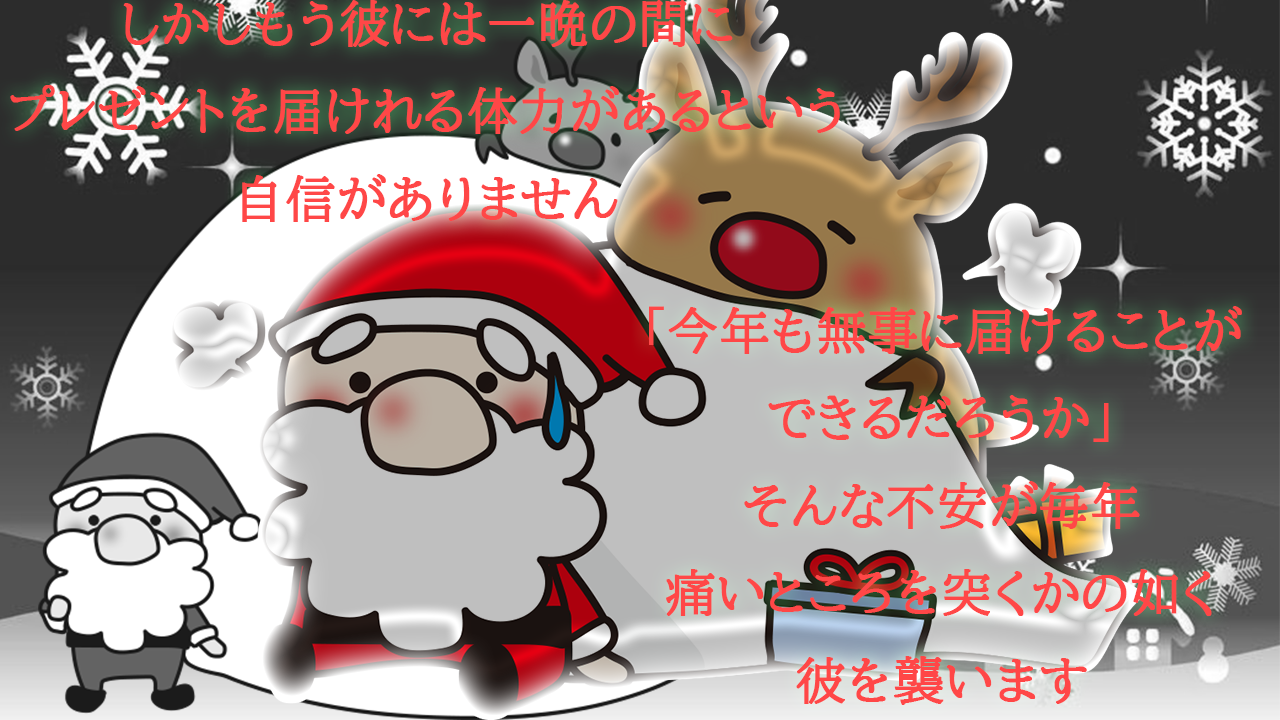
<style>
.page{position:relative;width:1280px;height:720px}
.page>*{position:absolute;margin:0}
.t1{font:12px "BIZ-UDPMincho-Medium";color:#ff4747;font-weight:bold}
</style>
<div class="page">
<p class="t1" style="left:10px;top:0px;width:830px;height:222px;text-align:center">しかしもう彼には一晩の間に<br>プレゼントを届けれる体力があるという<br>自信がありません</p>
<p class="t1" style="left:649px;top:306px;width:593px;height:399px;text-align:center">「今年も無事に届けることが<br>できるだろうか」<br>そんな不安が毎年<br>痛いところを突くかの如く<br>彼を襲います</p>
</div>
